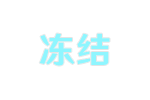
<style>
.page{position:relative;width:150px;height:100px;background:#ffffff}
.page>*{position:absolute;margin:0}
.t1{font:35.4px "HYWenHei-HEW";letter-spacing:0.05em;color:#8ff6ff}
</style>
<div class="page">
<p class="t1" style="left:39px;top:33px;width:71px;height:33px">冻结</p>
</div>
